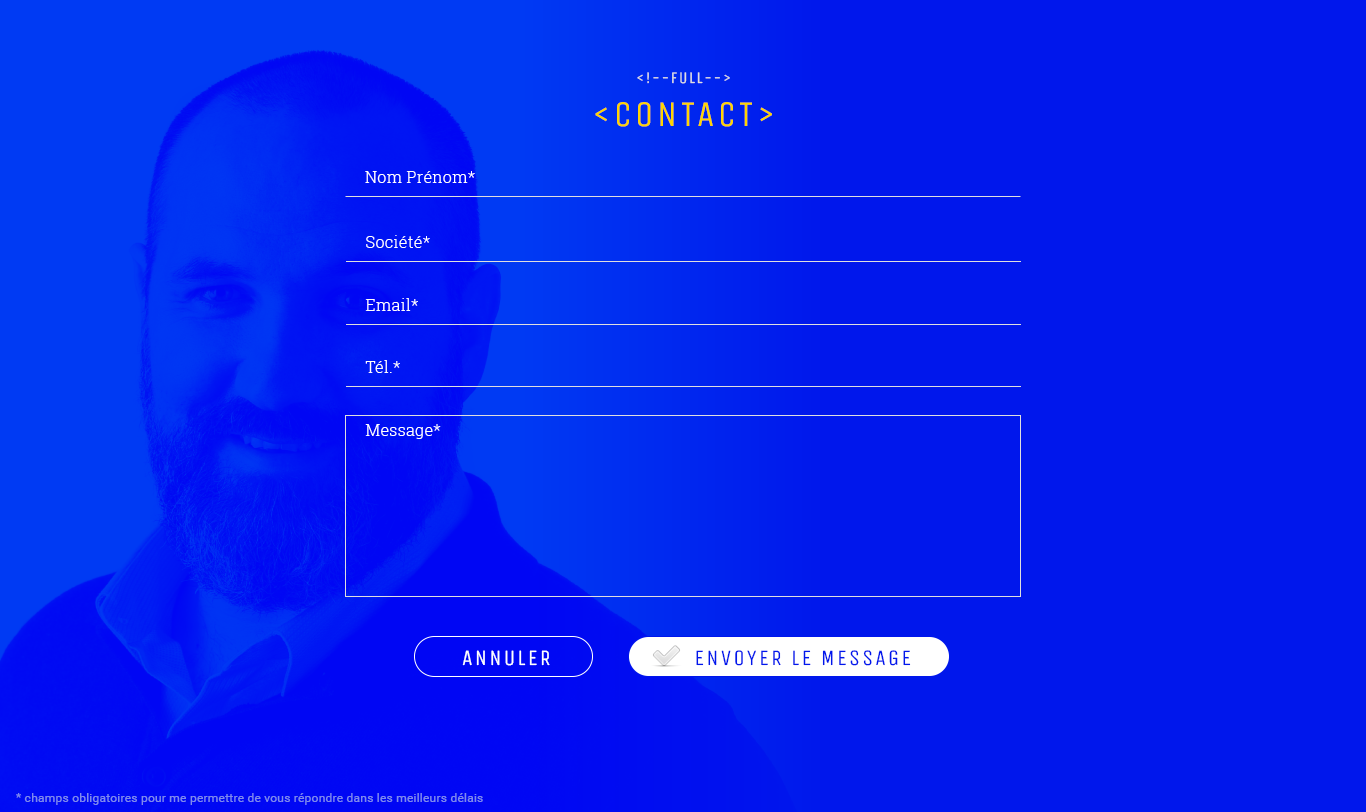
<style>
.page{position:relative;width:1366px;height:812px;background:#0017ec}
.page>*{position:absolute;margin:0}
.t1{font:16px "UnicaOne-Regular";letter-spacing:0.1em;color:#dfdfdf;text-transform:uppercase}
.t2{font:36px "UnicaOne-Regular";letter-spacing:0.1em;color:#ffd500;text-transform:uppercase}
.t3{font:16px "RobotoSlab-Light";letter-spacing:0.02em;color:#ffffff}
.t4{font:22px "UnicaOne-Regular";letter-spacing:0.1em;color:#ffffff;text-transform:uppercase}
.t5{font:22px "UnicaOne-Regular";letter-spacing:0.1em;color:#0017ec;text-transform:uppercase}
.t6{font:12px "Roboto-Regular";letter-spacing:0.02em;color:#7f8aec}
</style>
<div class="page">
<p class="t1" style="left:595px;top:72px;width:177px;height:55px;text-align:center">&lt;!--full--&gt;<br><span class="t2">&lt;contact&gt;</span></p>
<p class="t3" style="left:365px;top:171px;width:110px;height:12px">Nom Prénom*</p>
<p class="t3" style="left:366px;top:235px;width:64px;height:13px">Société*</p>
<p class="t3" style="left:365px;top:298px;width:53px;height:13px">Email*</p>
<p class="t3" style="left:365px;top:360px;width:35px;height:13px">Tél.*</p>
<p class="t3" style="left:365px;top:424px;width:76px;height:15px">Message*</p>
<p class="t4" style="left:462px;top:650px;width:88px;height:16px">annuler</p>
<p class="t5" style="left:696px;top:650px;width:215px;height:16px">envoyer le message</p>
<p class="t6" style="left:16px;top:793px;width:467px;height:12px">* champs obligatoires pour me permettre de vous répondre dans les meilleurs délais</p>
</div>
